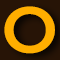
<style>
.page{position:relative;width:60px;height:60px;background:#271406}
.page>*{position:absolute;margin:0}
.t1{font:66.9px "GillSans-SemiBold";letter-spacing:0.05em;color:#ffae00}
</style>
<div class="page">
<p class="t1" style="left:4px;top:6px;width:51px;height:48px">O</p>
</div>
